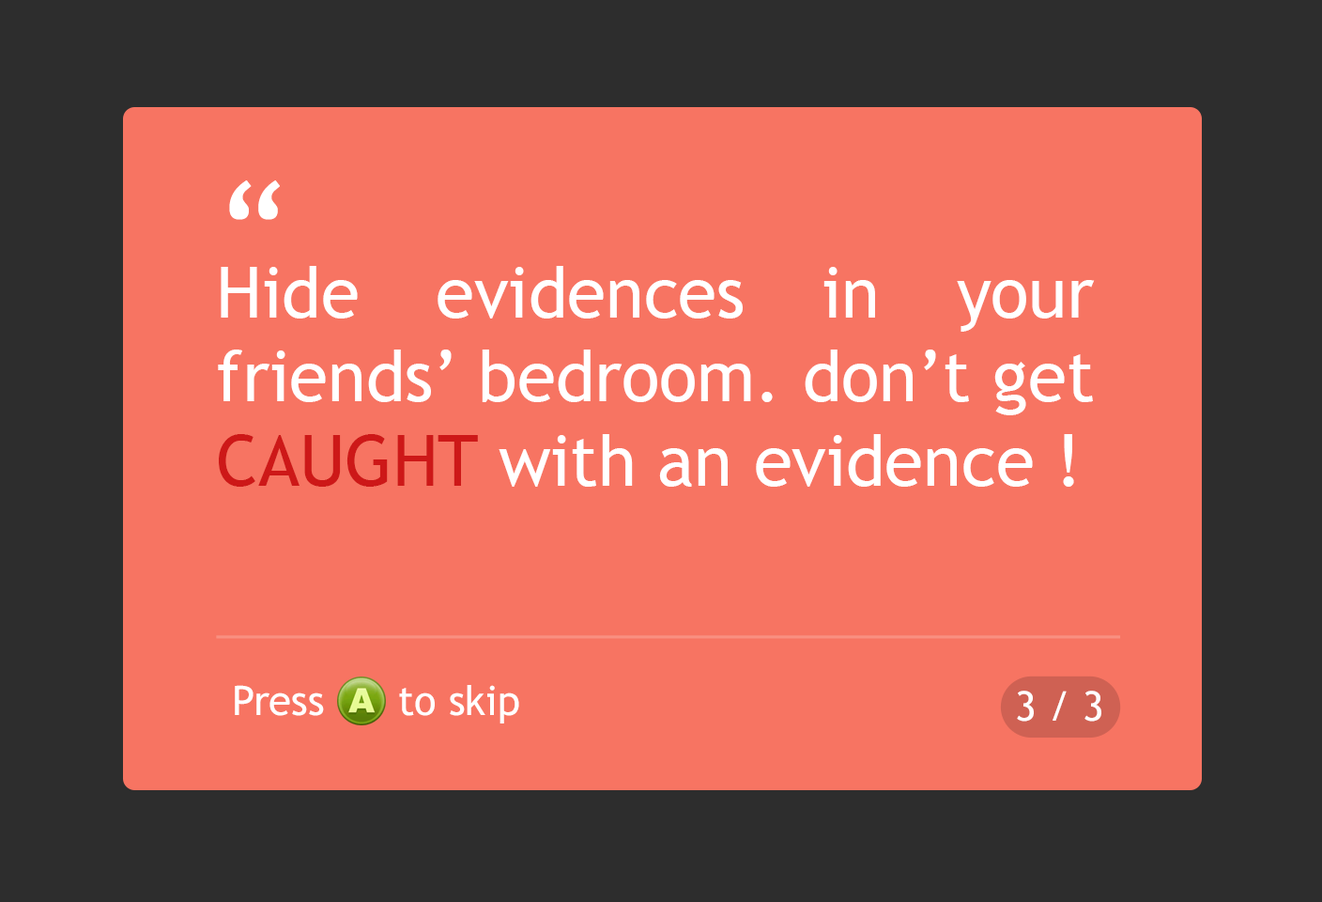
<style>
.page{position:relative;width:1322px;height:902px;background:#f77462}
.page>*{position:absolute;margin:0}
.t1{font:131.3px "TrebuchetMS";color:#ffffff}
.t2{font:70px "TrebuchetMS";color:#ffffff}
.t3{font:70px "TrebuchetMS";color:#cd1818}
.t4{font:40.9px "TrebuchetMS";color:#ffffff}
</style>
<div class="page">
<p class="t1" style="left:229px;top:180px;width:51px;height:40px">“</p>
<p class="t2" style="left:218px;top:266px;width:877px;height:221px;text-align:justify">Hide evidences in your friends’ bedroom. don’t get <span class="t3">CAUGHT</span> with an evidence !</p>
<p class="t4" style="left:235px;top:685px;width:284px;height:38px">Press      to skip</p>
<p class="t4" style="left:1017px;top:690px;width:85px;height:31px">3 / 3</p>
</div>
